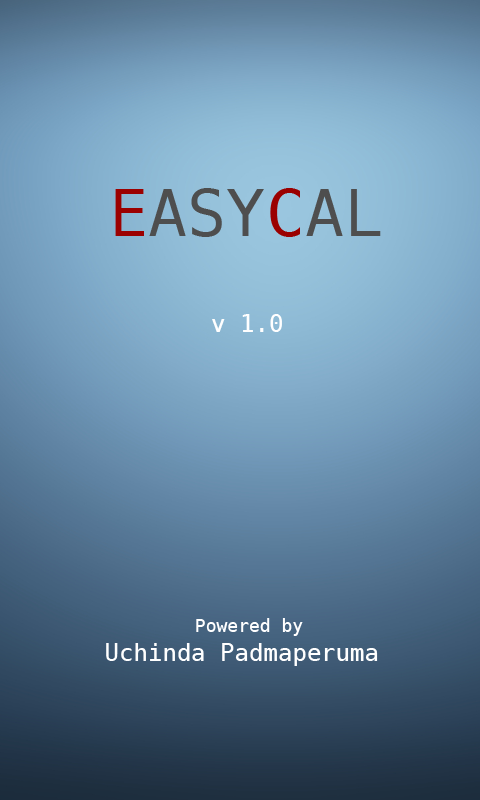
<style>
.page{position:relative;width:480px;height:800px}
.page>*{position:absolute;margin:0}
.t1{font:65px "BitstreamVeraSansMono-Roman";color:#4e4e4e}
.t2{font:65px "BitstreamVeraSansMono-Roman";color:#9c0000}
.t3{font:65px "BitstreamVeraSansMono-Roman";color:#9b0000}
.t4{font:24px "BitstreamVeraSansMono-Roman";color:#ffffff}
.t5{font:18px "BitstreamVeraSansMono-Roman";color:#ffffff}
</style>
<div class="page">
<p class="t1" style="left:115px;top:188px;width:266px;height:49px"><span class="t2">E</span>ASY<span class="t3">C</span>AL</p>
<p class="t4" style="left:212px;top:314px;width:70px;height:18px">v 1.0</p>
<p class="t4" style="left:106px;top:618px;width:272px;height:48px;text-align:center"><span class="t5">Powered by<br></span>Uchinda Padmaperuma</p>
</div>
